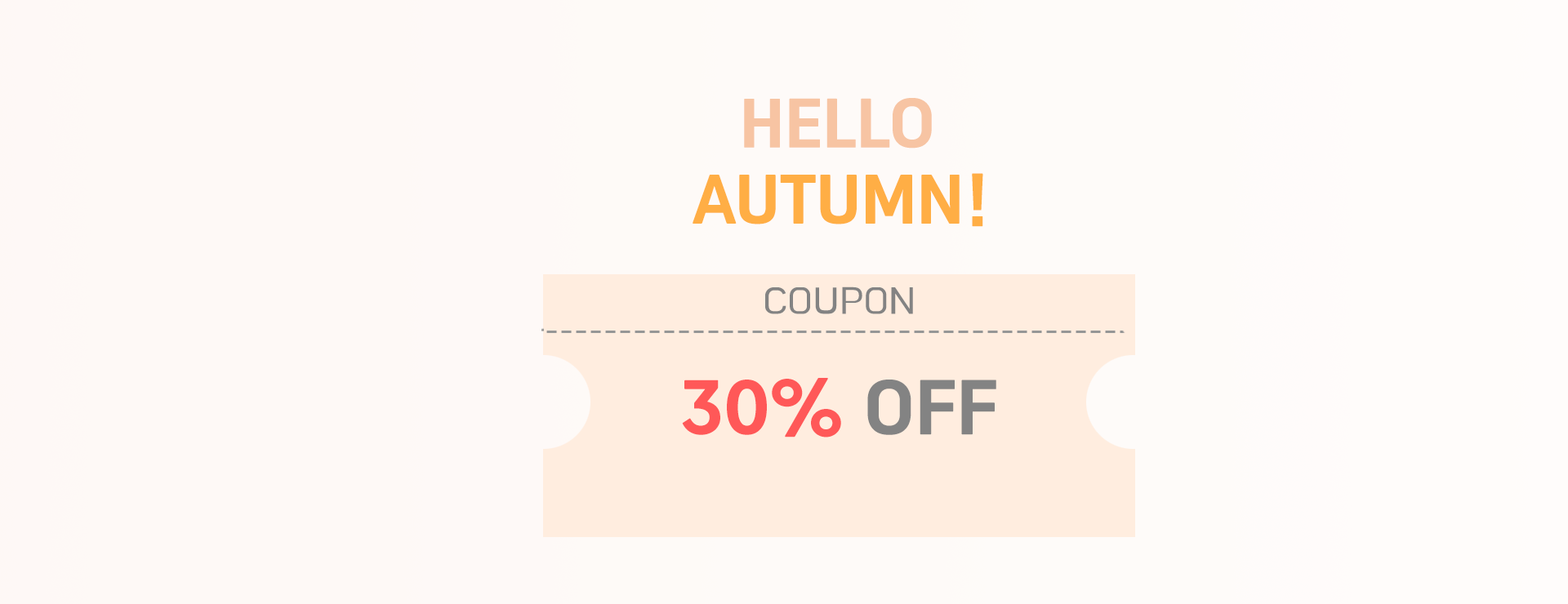
<style>
.page{position:relative;width:1568px;height:604px;background:#fef9f6}
.page>*{position:absolute;margin:0}
.t1{font:58.8px "SuseongDotum-Regular";color:#f7c4a3;text-transform:uppercase}
.t2{font:58.8px "SuseongDotum-Regular";color:#ffae45;text-transform:uppercase}
.t3{font:39.2px/13.1px "BMHANNAAir";color:#838383;text-transform:uppercase}
.t4{font:65.3px/13.1px "SuseongDotum-Regular";color:#ff5858;text-transform:uppercase}
.t5{font:65.3px/13.1px "SuseongDotum-Regular";color:#838383;text-transform:uppercase}
</style>
<div class="page">
<p class="t1" style="left:744px;top:98px;width:188px;height:51px">HELLO</p>
<p class="t2" style="left:693px;top:173px;width:290px;height:54px">AUTUMN!</p>
<p class="t3" style="left:682px;top:287px;width:314px;height:151px;text-align:center">coupon<br><br><br><br><br><br><br><br><br><span class="t4">30%</span><span class="t5"> OFF</span></p>
</div>
